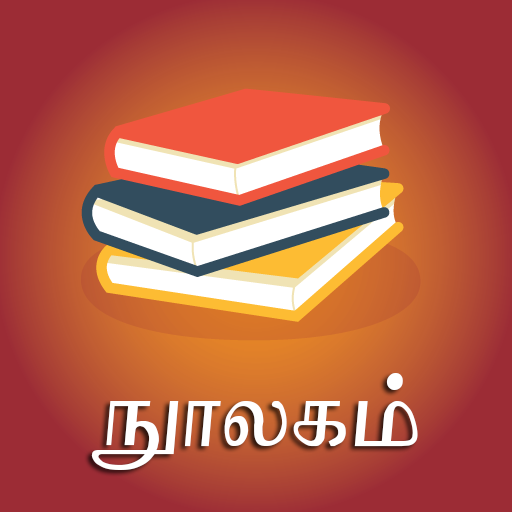
<style>
.page{position:relative;width:512px;height:512px}
.page>*{position:absolute;margin:0}
.t1{font:121px "Boopalam-Regular";color:#ffffff}
</style>
<div class="page">
<p class="t1" style="left:91px;top:373px;width:327px;height:97px">Ehyfk;</p>
</div>
